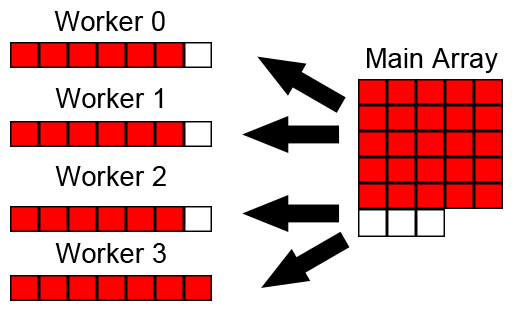
<style>
.page{position:relative;width:523px;height:312px;background:#ffffff}
.page>*{position:absolute;margin:0}
.t1{font:27px "ArialMT";letter-spacing:0.01em;color:#000000}
</style>
<div class="page">
<p class="t1" style="left:54px;top:11px;width:111px;height:20px">Worker 0</p>
<p class="t1" style="left:367px;top:48px;width:131px;height:25px">Main Array</p>
<p class="t1" style="left:55px;top:88px;width:108px;height:20px">Worker 1</p>
<p class="t1" style="left:55px;top:166px;width:111px;height:20px">Worker 2</p>
<p class="t1" style="left:55px;top:243px;width:111px;height:20px">Worker 3</p>
</div>
